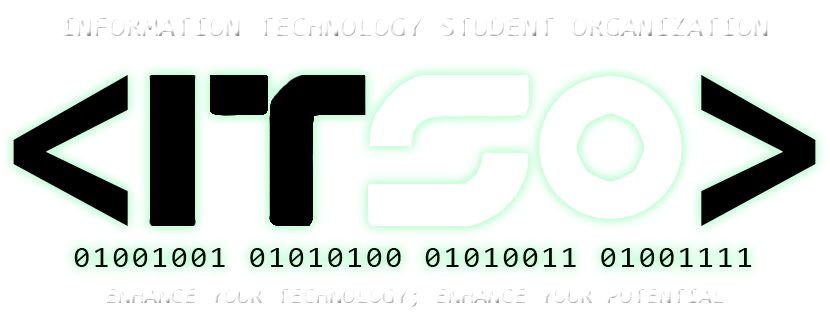
<style>
.page{position:relative;width:830px;height:320px;background:#ffffff}
.page>*{position:absolute;margin:0}
.t1{font:30px "Consolas"}
.t2{font:30px "Consolas";letter-spacing:0.1em;color:#000000}
.t3{font:24px "Consolas"}
</style>
<div class="page">
<p class="t1" style="left:62px;top:17px;width:706px;height:19px">INFORMATION TECHNOLOGY STUDENT ORGANIZATION</p>
<p class="t2" style="left:74px;top:248px;width:678px;height:19px">01001001 01010100 01010011 01001111</p>
<p class="t3" style="left:106px;top:288px;width:618px;height:19px">ENHANCE YOUR TECHNOLOGY; ENHANCE YOUR POTENTIAL</p>
</div>
